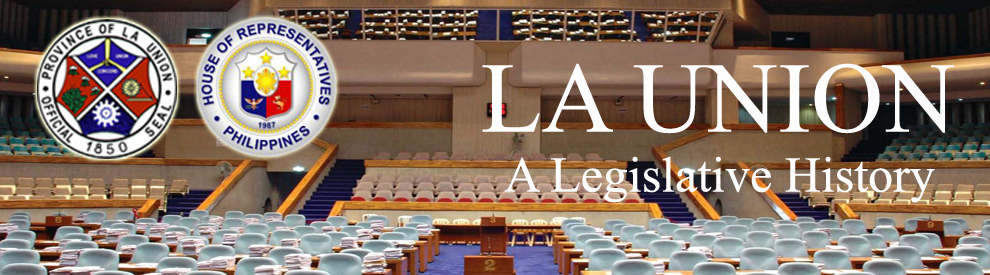
<style>
.page{position:relative;width:990px;height:275px}
.page>*{position:absolute;margin:0}
.t1{font:50px "TimesNewRomanPSMT";color:#fdfcfc}
.t2{font:100px "TimesNewRomanPSMT";color:#fdfdfd}
</style>
<div class="page">
<p class="t1" style="left:482px;top:63px;width:473px;height:140px;text-align:center"><span class="t2">LA UNION<br></span>A Legislative History</p>
</div>
